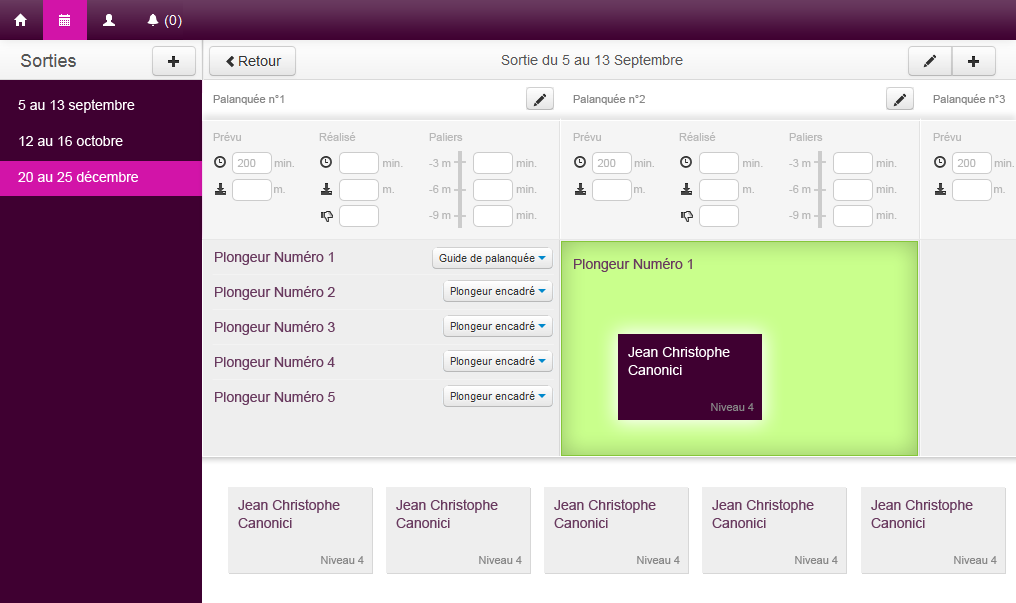
<style>
.page{position:relative;width:1016px;height:603px;background:#eeeeee}
.page>*{position:absolute;margin:0}
.t1{font:14px/36px "ArialMT";color:#ffffff}
.t2{font:11px "ArialMT";color:#878787}
.t3{font:11px/26px "ArialMT";color:#b8b8b8}
.t4{font:14px/35px "ArialMT";color:#693a5f}
.t5{font:14px "ArialMT";color:#693a5f}
.t6{font:14px/18px "ArialMT";color:#ffffff}
.t7{font:14px/35px "ArialMT";color:#ffffff}
.t8{font:14px/18px "ArialMT";color:#693a5f}
</style>
<div class="page">
<p class="t1" style="left:18px;top:99px;width:120px;height:83px">5 au 13 septembre<br>12 au 16 octobre<br>20 au 25 décembre</p>
<p class="t2" style="left:213px;top:94px;width:792px;height:11px">Palanquée n°1        Palanquée n°2        Palanquée n°3</p>
<p class="t3" style="left:429px;top:133px;width:108px;height:86px">Paliers<br>-3 m       min.<br>-6 m       min.<br>-9 m       min.</p>
<p class="t3" style="left:789px;top:133px;width:108px;height:86px">Paliers<br>-3 m       min.<br>-6 m       min.<br>-9 m       min.</p>
<p class="t4" style="left:215px;top:251px;width:120px;height:154px">Plongeur Numéro 1<br>Plongeur Numéro 2<br>Plongeur Numéro 3<br>Plongeur Numéro 4<br>Plongeur Numéro 5</p>
<p class="t5" style="left:574px;top:258px;width:118px;height:14px">Plongeur Numéro 1</p>
<p class="t6" style="left:628px;top:346px;width:102px;height:29px"><span class="t7">Jean C</span>hristophe<br>Canonici</p>
<p class="t2" style="left:711px;top:403px;width:43px;height:8px">Niveau 4</p>
<p class="t8" style="left:238px;top:499px;width:102px;height:29px"><span class="t4">Jean C</span>hristophe<br>Canonici</p>
<p class="t8" style="left:396px;top:499px;width:102px;height:29px"><span class="t4">Jean C</span>hristophe<br>Canonici</p>
<p class="t8" style="left:554px;top:499px;width:102px;height:29px"><span class="t4">Jean C</span>hristophe<br>Canonici</p>
<p class="t8" style="left:712px;top:499px;width:102px;height:29px"><span class="t4">Jean C</span>hristophe<br>Canonici</p>
<p class="t8" style="left:871px;top:499px;width:102px;height:29px"><span class="t4">Jean C</span>hristophe<br>Canonici</p>
<p class="t2" style="left:321px;top:556px;width:43px;height:8px">Niveau 4</p>
<p class="t2" style="left:479px;top:556px;width:43px;height:8px">Niveau 4</p>
<p class="t2" style="left:637px;top:556px;width:43px;height:8px">Niveau 4</p>
<p class="t2" style="left:795px;top:556px;width:43px;height:8px">Niveau 4</p>
<p class="t2" style="left:954px;top:556px;width:43px;height:8px">Niveau 4</p>
</div>
